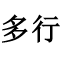
<style>
.page{position:relative;width:60px;height:60px;background:#ffffff}
.page>*{position:absolute;margin:0}
.t1{font:30px "NSimSun";color:#000000;font-weight:bold}
</style>
<div class="page">
<p class="t1" style="left:2px;top:14px;width:58px;height:29px">多行</p>
</div>
